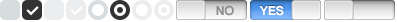
<style>
.page{position:relative;width:397px;height:22px;background:#ffffff}
.page>*{position:absolute;margin:0}
.t1{font:12.6px "Arial-BoldMT";letter-spacing:-0.04em;color:#8b8b8b}
.t2{font:12.6px "Arial-BoldMT";letter-spacing:-0.04em;color:#ffffff}
</style>
<div class="page">
<p class="t1" style="left:216px;top:5px;width:18px;height:11px">NO</p>
<p class="t2" style="left:259px;top:5px;width:25px;height:11px">YES</p>
</div>
